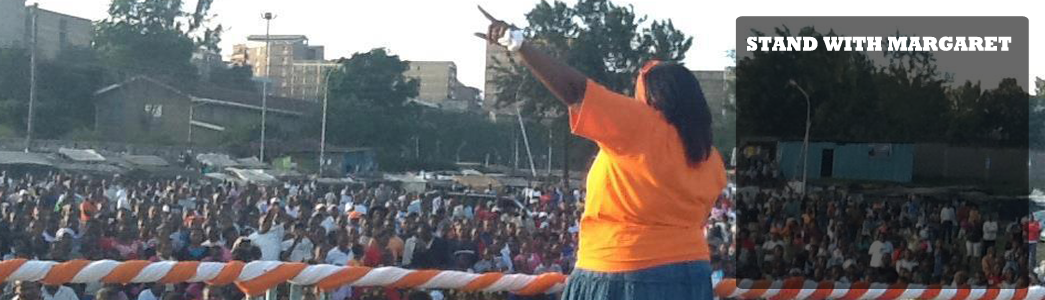
<style>
.page{position:relative;width:1045px;height:300px}
.page>*{position:absolute;margin:0}
.t1{font:20px "Rockwell-ExtraBold";color:#ffffff;scale:0.93 1}
</style>
<div class="page">
<p class="t1" style="left:747px;top:36px;width:265px;height:15px">STAND WITH MARGARET</p>
</div>
